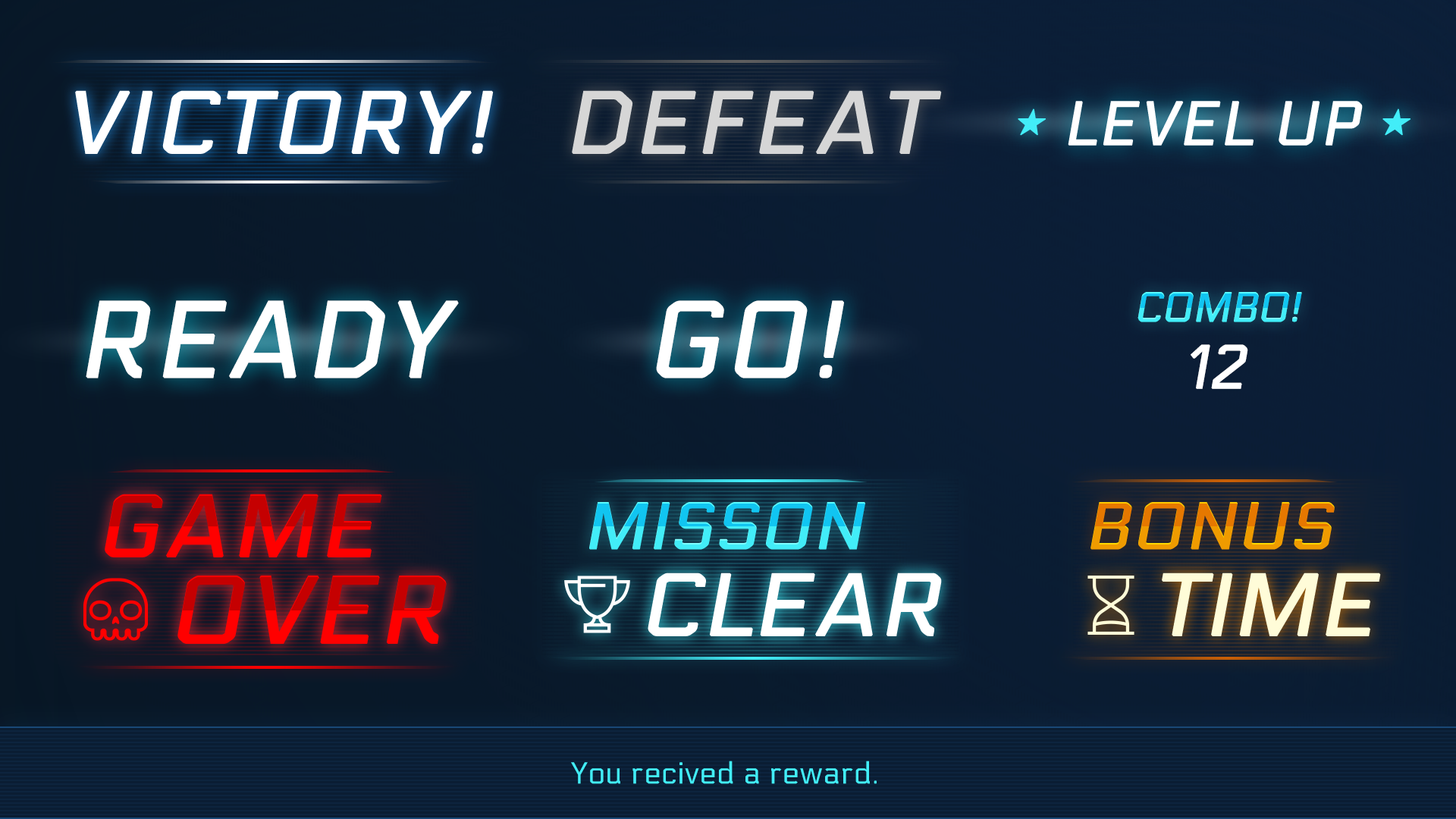
<style>
.page{position:relative;width:1456px;height:819px}
.page>*{position:absolute;margin:0}
.t1{font:86.4px "Electrolize-Regular";letter-spacing:0.02em;color:#ffffff;text-transform:uppercase;font-weight:bold;font-style:italic;scale:1.05 1}
.t2{font:86.4px "Electrolize-Regular";letter-spacing:0.02em;color:#d6d6d6;text-transform:uppercase;font-weight:bold;font-style:italic;scale:1.05 1}
.t3{font:60.8px "Electrolize-Regular";letter-spacing:0.02em;color:#ffffff;text-transform:uppercase;font-weight:bold;font-style:italic}
.t4{font:30.4px "NanumSquareOTFR";letter-spacing:0.02em;color:#42edf8;text-transform:uppercase;font-weight:bold;font-style:italic}
.t5{font:40.9px "Electrolize-Regular";letter-spacing:-0.025em;text-transform:uppercase;font-weight:bold;font-style:italic}
.t6{font:106.2px "Electrolize-Regular";letter-spacing:0.02em;color:#ffffff;text-transform:uppercase;font-weight:bold;font-style:italic}
.t7{font:60.7px "Electrolize-Regular";color:#ffffff;text-transform:uppercase;font-weight:bold;font-style:italic}
.t8{font:86.4px "Electrolize-Regular";letter-spacing:0.02em;text-transform:uppercase;font-weight:bold;font-style:italic;scale:1.05 1}
.t9{font:64.8px "Electrolize-Regular";text-transform:uppercase;font-weight:bold;font-style:italic;scale:1.05 1}
.t10{font:93.7px "Electrolize-Regular";letter-spacing:0.02em;text-transform:uppercase;font-weight:bold;font-style:italic;scale:1.05 1}
.t11{font:86.4px "Electrolize-Regular";color:#ffffff;text-transform:uppercase;font-weight:bold;font-style:italic;scale:1.05 1}
.t12{font:86.4px "Electrolize-Regular";color:#fffcd8;text-transform:uppercase;font-weight:bold;font-style:italic;scale:1.05 1}
.t13{font:30.3px "Electrolize-Regular";letter-spacing:0.02em;color:#42edf8}
</style>
<div class="page">
<p class="t1" style="left:75px;top:90px;width:419px;height:64px">victory!</p>
<p class="t2" style="left:572px;top:90px;width:370px;height:64px">defeat</p>
<p class="t3" style="left:1018px;top:101px;width:393px;height:45px"><span class="t4">★ </span>LEVEL UP <span class="t4">★</span></p>
<p class="t5" style="left:1137px;top:292px;width:165px;height:30px">combo!</p>
<p class="t6" style="left:86px;top:300px;width:373px;height:78px">ready</p>
<p class="t6" style="left:656px;top:300px;width:188px;height:78px">go!</p>
<p class="t7" style="left:1191px;top:344px;width:57px;height:45px">12</p>
<p class="t8" style="left:105px;top:494px;width:277px;height:63px">game</p>
<p class="t9" style="left:589px;top:502px;width:276px;height:48px">MISSON</p>
<p class="t9" style="left:1090px;top:502px;width:245px;height:48px">bonus</p>
<p class="t10" style="left:177px;top:576px;width:270px;height:68px">over</p>
<p class="t11" style="left:648px;top:573px;width:294px;height:63px">CLEAR</p>
<p class="t12" style="left:1162px;top:573px;width:219px;height:63px">time</p>
<p class="t13" style="left:571px;top:761px;width:306px;height:23px">You recived a reward.</p>
</div>
